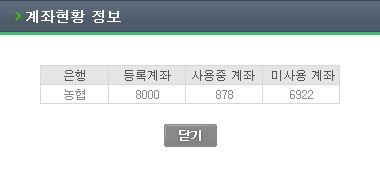
<style>
.page{position:relative;width:380px;height:180px;background:#ffffff}
.page>*{position:absolute;margin:0}
.t1{font:14px "Dotum";color:#ffffff;font-weight:bold}
.t2{font:12px "Dotum";color:#555555;text-transform:uppercase}
.t3{font:12px "Dotum";color:#888888;text-transform:uppercase}
.t4{font:12px "Dotum";letter-spacing:-0.05em;color:#ffffff;font-weight:bold}
</style>
<div class="page">
<p class="t1" style="left:26px;top:10px;width:95px;height:13px">계좌현황 정보</p>
<p class="t2" style="left:64px;top:70px;width:271px;height:11px">은행         등록계좌     사용중 계좌    미사용 계좌</p>
<p class="t3" style="left:64px;top:89px;width:249px;height:11px">농협            8000              878              6922</p>
<p class="t4" style="left:179px;top:130px;width:22px;height:11px">닫기</p>
</div>
